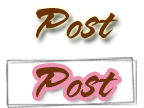
<style>
.page{position:relative;width:144px;height:108px;background:#ffffff}
.page>*{position:absolute;margin:0}
.t1{font:35px "VNI-Butlong";color:#6c320c}
</style>
<div class="page">
<p class="t1" style="left:36px;top:8px;width:83px;height:31px">Post</p>
<p class="t1" style="left:36px;top:67px;width:83px;height:31px">Post</p>
</div>
